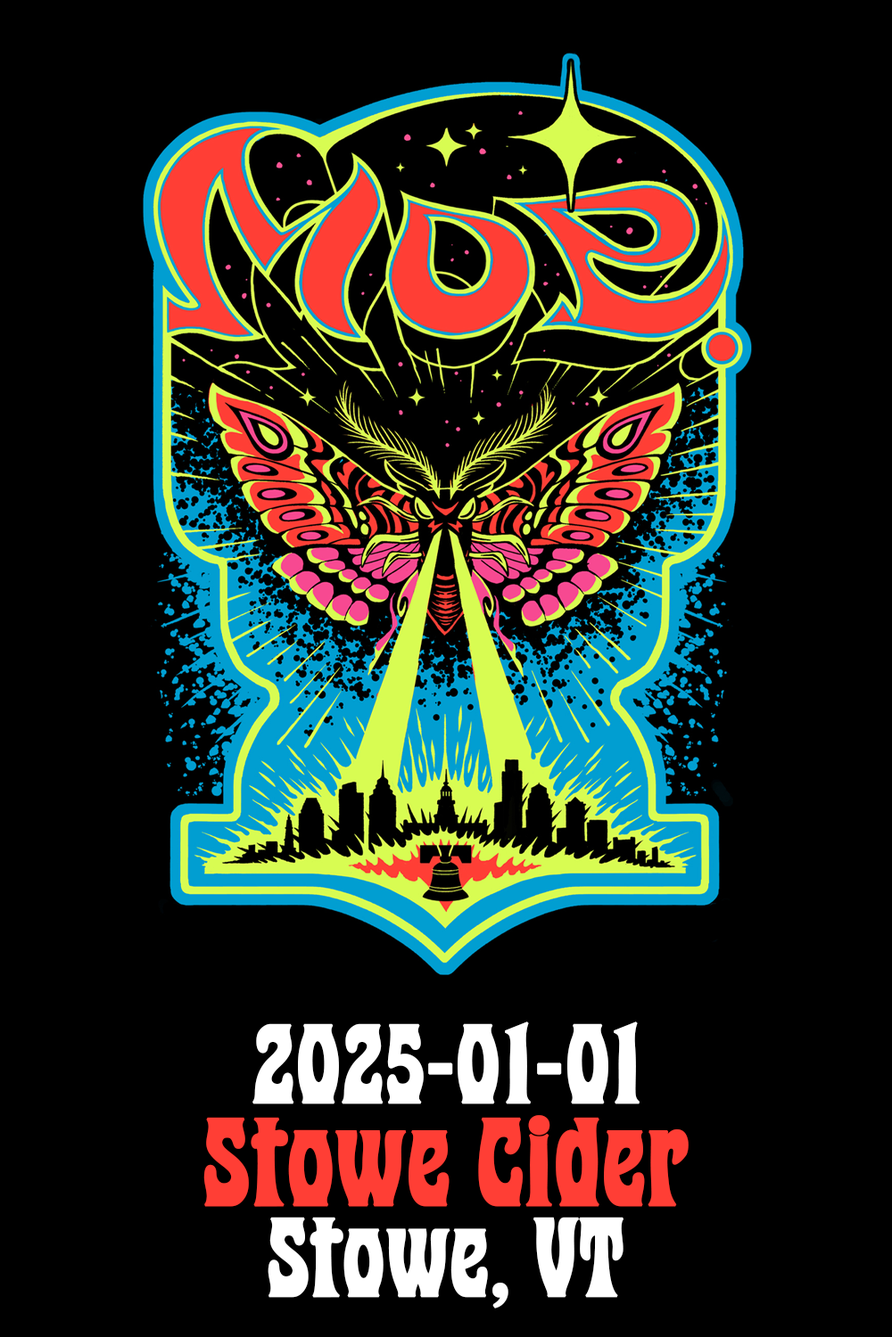
<style>
.page{position:relative;width:892px;height:1337px;background:#000000}
.page>*{position:absolute;margin:0}
.t1{font:94.7px "PurePsychedelia-Bold";color:#ffffff;font-weight:bold}
.t2{font:105.2px "PurePsychedelia-Bold";color:#ff3e35;font-weight:bold}
</style>
<div class="page">
<p class="t1" style="left:252px;top:1022px;width:387px;height:83px">2025-01-01</p>
<p class="t2" style="left:203px;top:1115px;width:485px;height:92px">Stowe Cider</p>
<p class="t1" style="left:267px;top:1217px;width:356px;height:92px">Stowe, VT</p>
</div>
